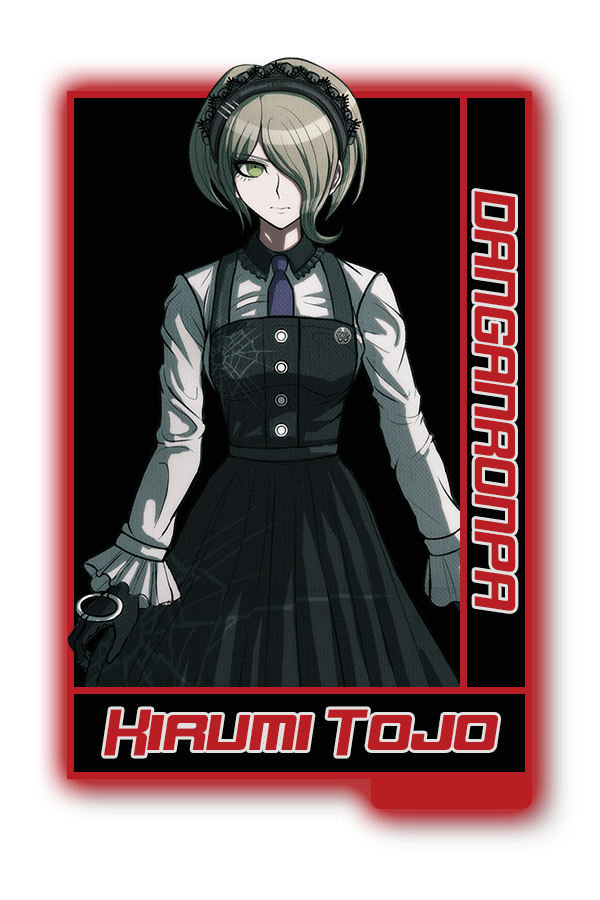
<style>
.page{position:relative;width:600px;height:900px;background:#020202}
.page>*{position:absolute;margin:0}
.t1{font:48.8px "DorBlue";color:#bb2c2e}
.t2{font:55.4px "DorBlue";color:#bb2c2e}
</style>
<div class="page">
<p class="t1" style="left:474px;top:191px;width:42px;height:420px;rotate:90deg">DANGANRONPA</p>
<p class="t2" style="left:104px;top:709px;width:394px;height:47px">Kirumi Tojo</p>
</div>
